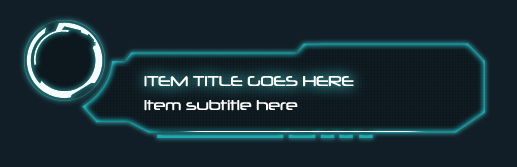
<style>
.page{position:relative;width:517px;height:167px;background:#111e27}
.page>*{position:absolute;margin:0}
.t1{font:13.6px "Neuropol-Regular";color:#ffffff}
</style>
<div class="page">
<p class="t1" style="left:144px;top:76px;width:210px;height:11px">ITEM TITLE GOES HERE</p>
<p class="t1" style="left:144px;top:100px;width:154px;height:11px">Item subtitle here</p>
</div>
